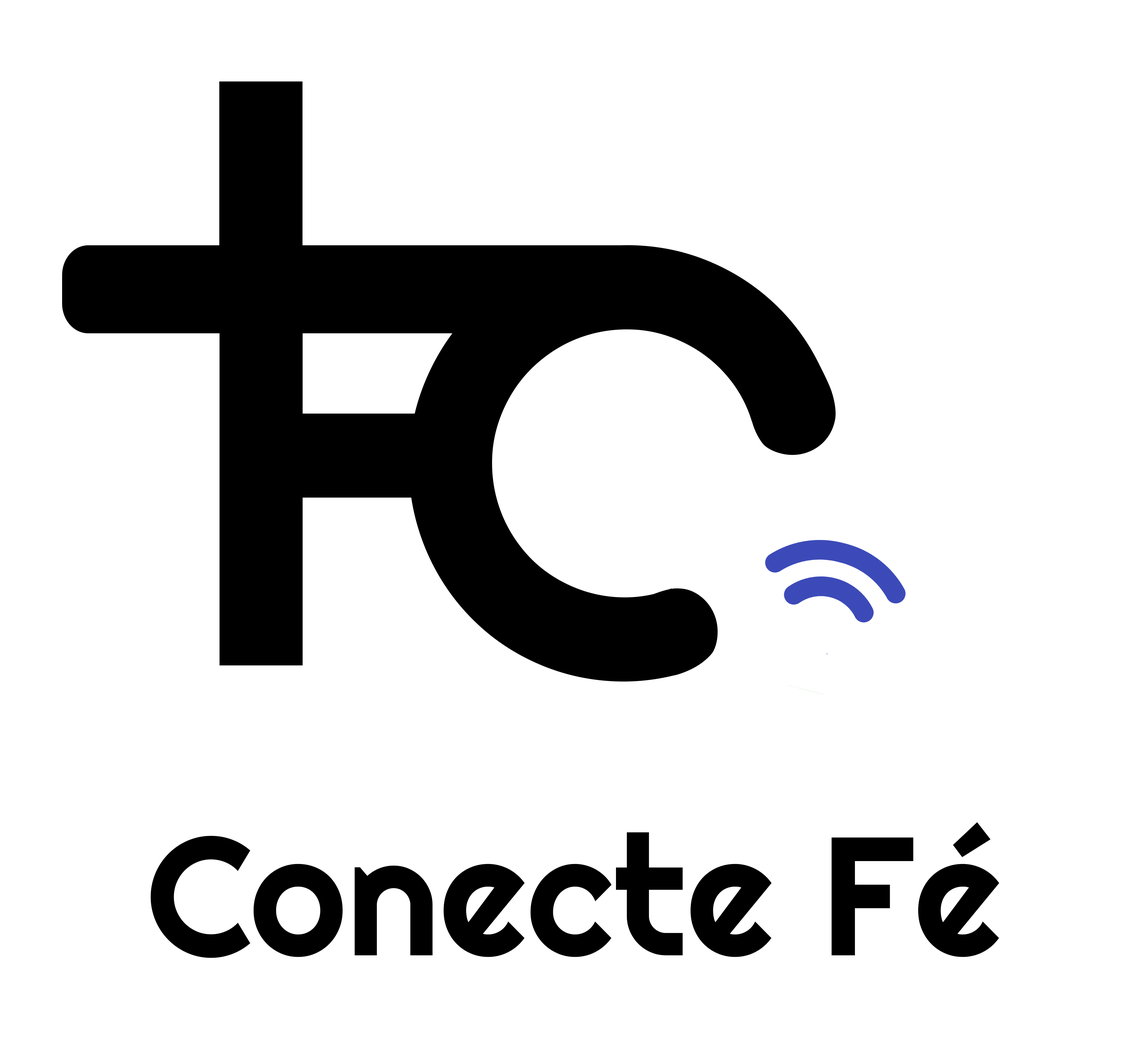
<style>
.page{position:relative;width:1128px;height:1057px;background:#ffffff}
.page>*{position:absolute;margin:0}
.t1{font:599.4px "Righteous-Regular";color:#000000}
.t2{font:168.3px "Righteous-Regular";color:#000000}
</style>
<div class="page">
<p class="t1" style="left:219px;top:245px;width:292px;height:420px">F</p>
<p class="t2" style="left:151px;top:822px;width:849px;height:136px">Conecte Fé</p>
</div>
